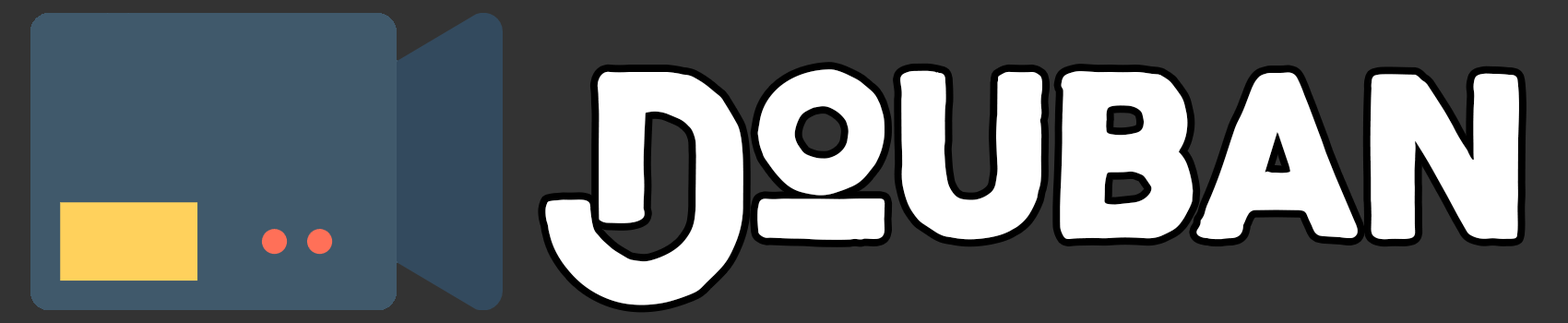
<style>
.page{position:relative;width:1568px;height:323px;background:#333333}
.page>*{position:absolute;margin:0}
.t1{font:294.2px "iCielBrawls";color:#ffffff}
</style>
<div class="page">
<p class="t1" style="left:545px;top:69px;width:974px;height:236px">Douban</p>
</div>
